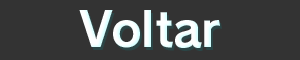
<style>
.page{position:relative;width:300px;height:60px;background:#333333}
.page>*{position:absolute;margin:0}
.t1{font:48px "RodinPro-B";letter-spacing:-0.016em;color:#feffff}
</style>
<div class="page">
<p class="t1" style="left:79px;top:10px;width:141px;height:38px">Voltar</p>
</div>
